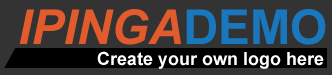
<style>
.page{position:relative;width:332px;height:75px;background:#333333}
.page>*{position:absolute;margin:0}
.t1{font:48px "Arial-BoldItalicMT";color:#e25b2c}
.t2{font:48px "Arial-BoldMT";color:#1977be}
.t3{font:18px "Arial-BoldMT";color:#ffffff}
</style>
<div class="page">
<p class="t1" style="left:19px;top:9px;width:307px;height:36px">IPINGA<span class="t2">DEMO</span></p>
<p class="t3" style="left:97px;top:51px;width:227px;height:18px">Create your own logo here</p>
</div>
